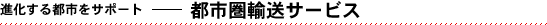
<style>
.page{position:relative;width:547px;height:25px;background:#ffffff}
.page>*{position:absolute;margin:0}
.t1{font:19px "DFHSGothic-W7-MP-RKSJ-H";color:#000000}
</style>
<div class="page">
<p class="t1" style="left:170px;top:0px;width:211px;height:23px">都市圏輸送サービス</p>
</div>
